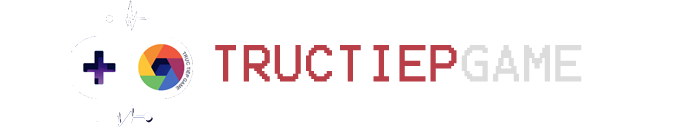
<style>
.page{position:relative;width:684px;height:131px;background:#ffffff}
.page>*{position:absolute;margin:0}
.t1{font:41.6px "Terminal";color:#b83e48}
.t2{font:41.6px "Terminal";color:#dcdcdc}
</style>
<div class="page">
<p class="t1" style="left:215px;top:45px;width:367px;height:37px">TRUCTIEP<span class="t2">GAME</span></p>
</div>
